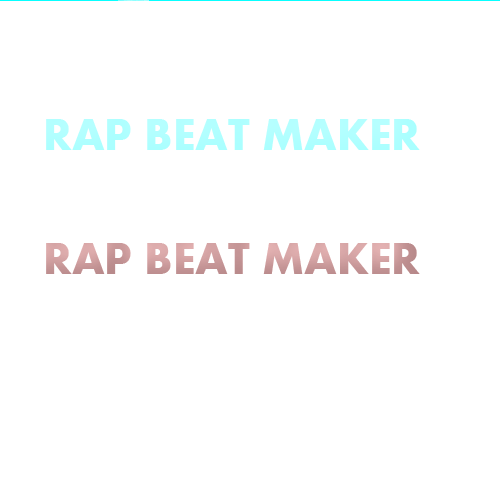
<style>
.page{position:relative;width:500px;height:500px;background:#ffffff}
.page>*{position:absolute;margin:0}
.t1{font:45.8px "Aharoni-Bold";color:#b1ffff}
</style>
<div class="page">
<p class="t1" style="left:46px;top:118px;width:374px;height:31px">RAP BEAT MAKER</p>
</div>
